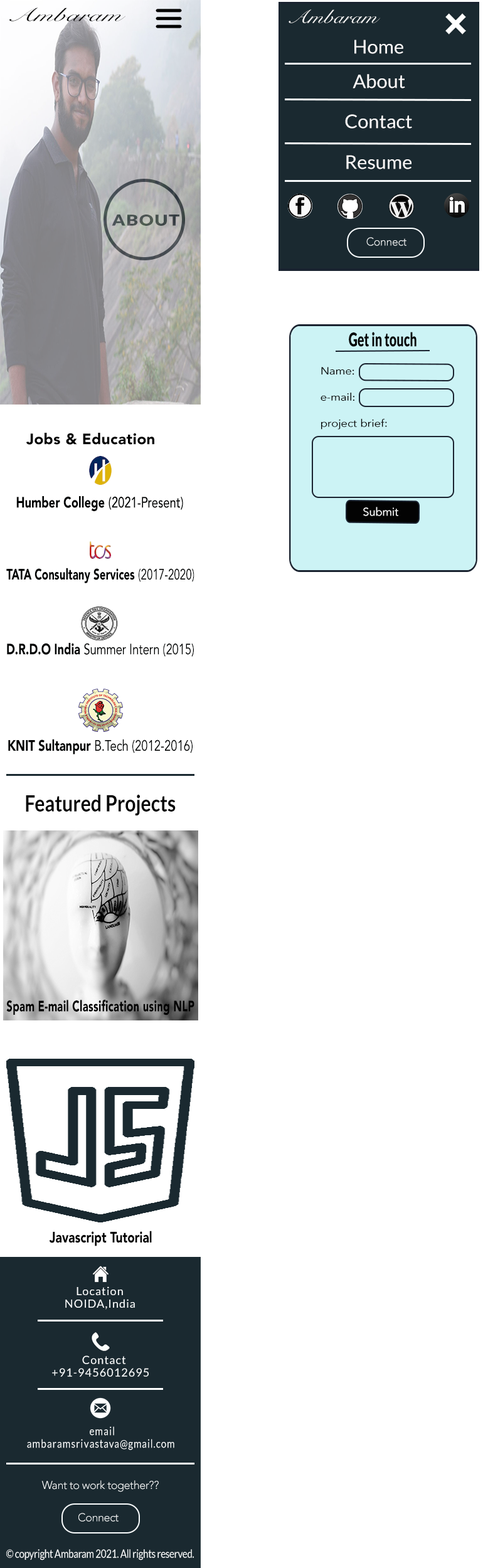
<style>
.page{position:relative;width:483px;height:1568px;background:#ffffff}
.page>*{position:absolute;margin:0}
.t1{font:18.8px "SnellRoundhand";color:#020202;scale:1.55 1}
.t2{font:18.8px "SnellRoundhand";color:#fcfcfc;scale:1.22 1}
.t3{font:18.8px "Lato-Regular";color:#fcfafa}
.t4{font:15.1px "Lato-Black";letter-spacing:0.06em;color:#46514f;scale:1.19 1}
.t5{font:11.3px "Avenir-Light";letter-spacing:-0.025em;color:#f9fcfd}
.t6{font:18.8px "Lato-Black";color:#050505;scale:0.66 1}
.t7{font:10.5px/26.2px "Avenir-Roman";color:#050505;scale:1.11 1}
.t8{font:10.5px/26.2px "AmericanTypewriter";color:#050505;scale:1.11 1}
.t9{font:15.1px "Avenir-Black";letter-spacing:0.02em;color:#010101}
.t10{font:15.1px "Avenir-Black";color:#000202;scale:0.77 1}
.t11{font:15.1px "Avenir-Medium";color:#000202;scale:0.77 1}
.t12{font:11.3px "Avenir-Roman";color:#fcfcfc}
.t13{font:15.1px "Avenir-Black";color:#000202;scale:0.71 1}
.t14{font:15.1px "Avenir-Roman";color:#000202;scale:0.71 1}
.t15{font:15.1px "Avenir-Roman";color:#000202;scale:0.76 1}
.t16{font:15.1px "Avenir-Black";color:#000202;scale:0.76 1}
.t17{font:15.1px "Avenir-Roman";color:#000202;scale:0.77 1}
.t18{font:22.6px "Lato-Bold";color:#040404;scale:0.84 1}
.t19{font:15.1px "Avenir-Black";letter-spacing:0.02em;color:#010101;scale:0.69 1}
.t20{font:15.1px "Avenir-Black";color:#010101;scale:0.79 1}
.t21{font:11.3px/12.5px "Lato-Regular";letter-spacing:0.06em;color:#f9fcfd}
.t22{font:15.1px/12.5px "Lato-Black";letter-spacing:0.06em;color:#f9fcfd}
.t23{font:11.3px/12.5px "Lato-Regular";letter-spacing:0.08em;color:#f9fcfd;scale:0.84 1}
.t24{font:11.3px/11.3px "Lato-Regular";letter-spacing:0.06em;color:#f9fcfd;scale:0.84 1}
.t25{font:11.3px/12.5px "Lato-Regular";letter-spacing:0.06em;color:#f9fcfd;scale:0.84 1}
.t26{font:11.3px "Lato-Regular";letter-spacing:-0.025em;color:#f9fcfd;scale:0.85 1}
</style>
<div class="page">
<p class="t1" style="left:9px;top:8px;width:116px;height:13px">Ambaram</p>
<p class="t2" style="left:289px;top:9px;width:91px;height:14px">Ambaram</p>
<p class="t3" style="left:354px;top:40px;width:49px;height:14px">Home</p>
<p class="t3" style="left:352px;top:74px;width:53px;height:14px">About</p>
<p class="t3" style="left:345px;top:114px;width:67px;height:15px">Contact</p>
<p class="t3" style="left:346px;top:155px;width:65px;height:14px">Resume</p>
<p class="t4" style="left:112px;top:215px;width:67px;height:11px">ABOUT</p>
<p class="t5" style="left:366px;top:237px;width:40px;height:9px">Connect</p>
<p class="t6" style="left:349px;top:332px;width:67px;height:15px">Get in touch</p>
<p class="t7" style="left:320px;top:367px;width:67px;height:63px">Name<span class="t8">: <br></span>e-mail<span class="t8">:<br></span>project brief:</p>
<p class="t9" style="left:26px;top:433px;width:128px;height:12px">Jobs &amp; Education</p>
<p class="t10" style="left:16px;top:496px;width:167px;height:15px">Humber College <span class="t11">(2021-Present)</span></p>
<p class="t12" style="left:363px;top:507px;width:35px;height:9px">Submit</p>
<p class="t13" style="left:6px;top:568px;width:188px;height:15px">TATA Consultany Services <span class="t14">(2017-2020)</span></p>
<p class="t15" style="left:7px;top:643px;width:187px;height:14px"><span class="t16">D.R.D.O India </span>Summer Intern (2015)</p>
<p class="t10" style="left:8px;top:739px;width:185px;height:16px">KNIT Sultanpur <span class="t17">B.Tech (</span><span class="t17">2012-2016)</span></p>
<p class="t18" style="left:26px;top:795px;width:150px;height:21px">Featured Projects</p>
<p class="t19" style="left:6px;top:1000px;width:188px;height:15px">Spam E-mail Classification using NLP</p>
<p class="t20" style="left:49px;top:1231px;width:103px;height:15px">Javascript Tutorial</p>
<p class="t21" style="left:65px;top:1286px;width:70px;height:24px">Location<br>NOIDA,India</p>
<p class="t21" style="left:52px;top:1355px;width:97px;height:22px"><span class="t22">        </span>Contact<br>+91-9456012695</p>
<p class="t23" style="left:27px;top:1426px;width:147px;height:24px"><span class="t24">                          </span>email<br>ambaramsriv<span class="t25">astava@gmail.com</span></p>
<p class="t5" style="left:41px;top:1480px;width:118px;height:12px">Want to work together??</p>
<p class="t5" style="left:78px;top:1513px;width:41px;height:9px">Connect</p>
<p class="t26" style="left:6px;top:1549px;width:188px;height:11px">© copyright Ambaram 2021. All rights reserved.</p>
</div>
